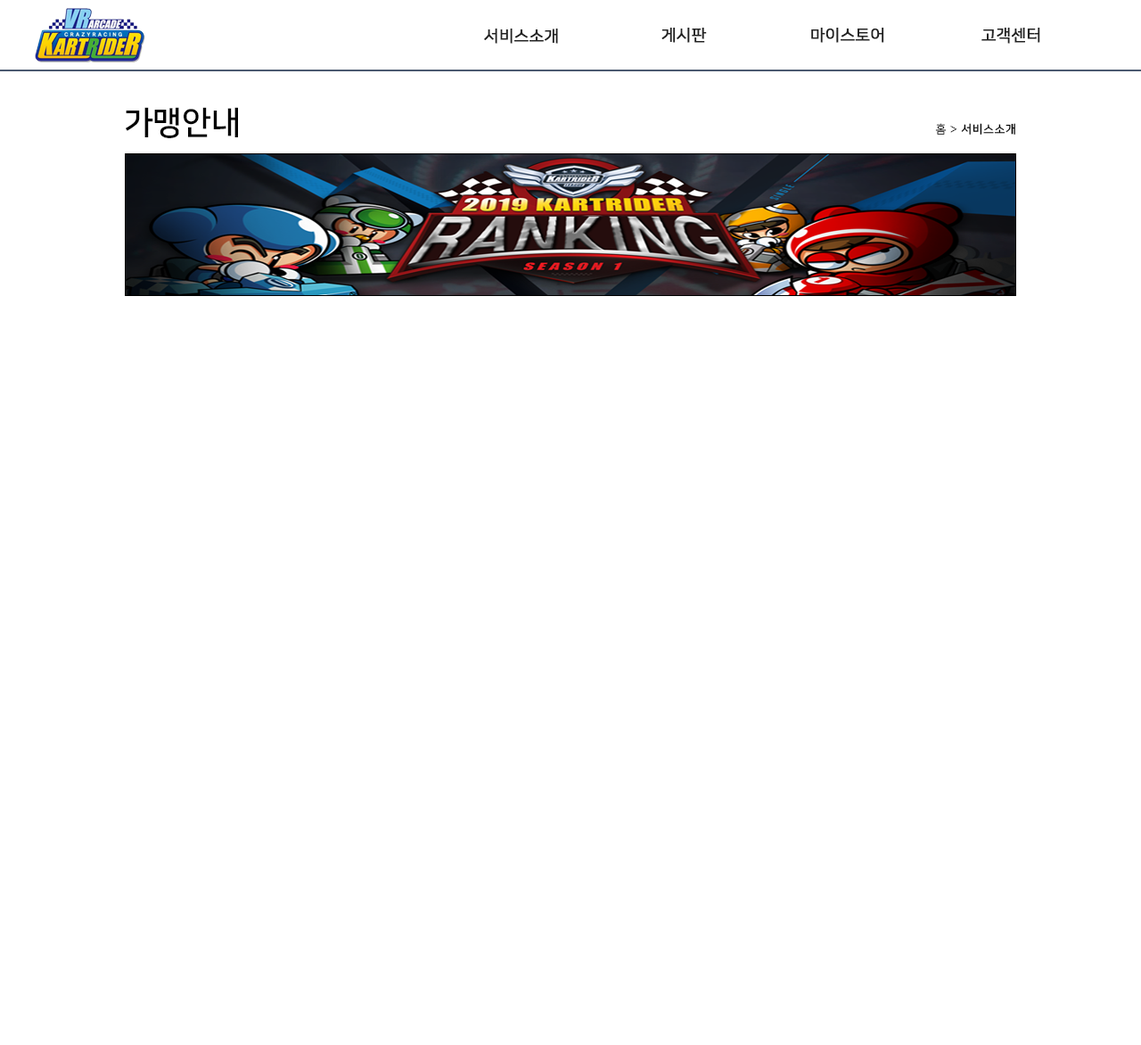
<style>
.page{position:relative;width:1141px;height:1045px;background:#ffffff}
.page>*{position:absolute;margin:0}
.t1{font:16px "NanumSquareR";color:#222222;font-weight:bold}
.t2{font:32.1px "NanumSquareB";color:#000000}
.t3{font:11.6px "NanumSquareB";letter-spacing:0.05em;color:#000000}
.t4{font:11.6px "NanumSquareR";letter-spacing:0.05em;color:#000000}
.t5{font:11.6px "NanumSquareL";letter-spacing:0.05em;color:#000000}
</style>
<div class="page">
<p class="t1" style="left:484px;top:28px;width:74px;height:16px">서비스소개</p>
<p class="t1" style="left:662px;top:27px;width:45px;height:16px">게시판</p>
<p class="t1" style="left:811px;top:27px;width:73px;height:16px">마이스토어</p>
<p class="t1" style="left:982px;top:27px;width:58px;height:16px">고객센터</p>
<p class="t2" style="left:125px;top:107px;width:113px;height:31px">가맹안내</p>
<p class="t3" style="left:935px;top:123px;width:80px;height:12px"><span class="t4">홈 </span><span class="t5">&gt;</span> 서비스소개</p>
</div>
